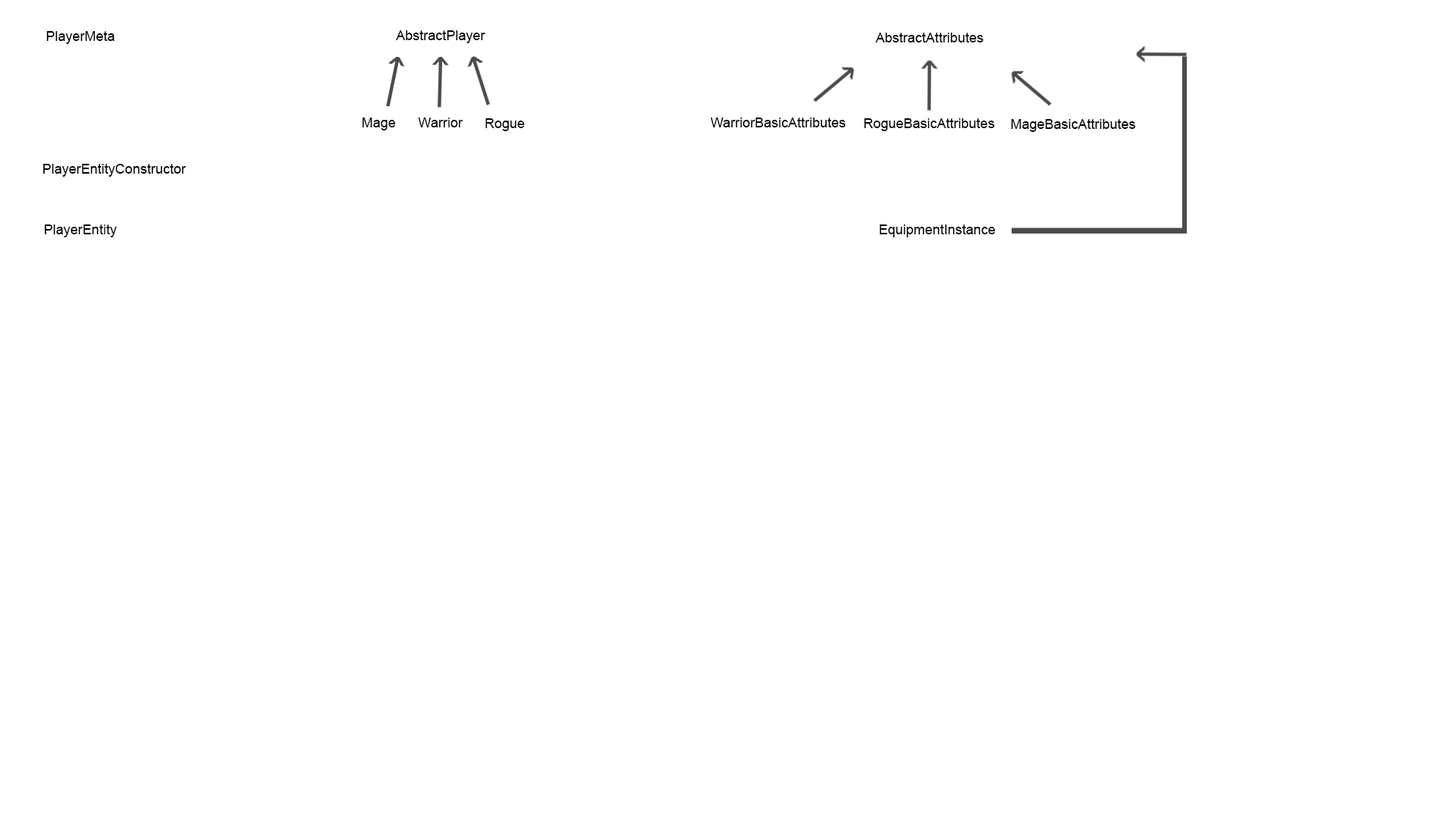
<style>
.page{position:relative;width:1456px;height:819px;background:#ffffff}
.page>*{position:absolute;margin:0}
.t1{font:13.6px "ArialMT";color:#000000}
</style>
<div class="page">
<p class="t1" style="left:46px;top:31px;width:69px;height:13px">PlayerMeta</p>
<p class="t1" style="left:396px;top:30px;width:89px;height:13px">AbstractPlayer</p>
<p class="t1" style="left:875px;top:33px;width:109px;height:9px">AbstractAttributes</p>
<p class="t1" style="left:362px;top:118px;width:34px;height:12px">Mage</p>
<p class="t1" style="left:418px;top:118px;width:45px;height:9px">Warrior</p>
<p class="t1" style="left:485px;top:118px;width:40px;height:13px">Rogue</p>
<p class="t1" style="left:711px;top:118px;width:135px;height:9px">WarriorBasicAttributes</p>
<p class="t1" style="left:864px;top:118px;width:131px;height:13px">RogueBasicAttributes</p>
<p class="t1" style="left:1011px;top:119px;width:124px;height:13px">MageBasicAttributes</p>
<p class="t1" style="left:43px;top:164px;width:144px;height:13px">PlayerEntityConstructor</p>
<p class="t1" style="left:45px;top:224px;width:72px;height:13px">PlayerEntity</p>
<p class="t1" style="left:880px;top:224px;width:116px;height:13px">EquipmentInstance</p>
</div>
